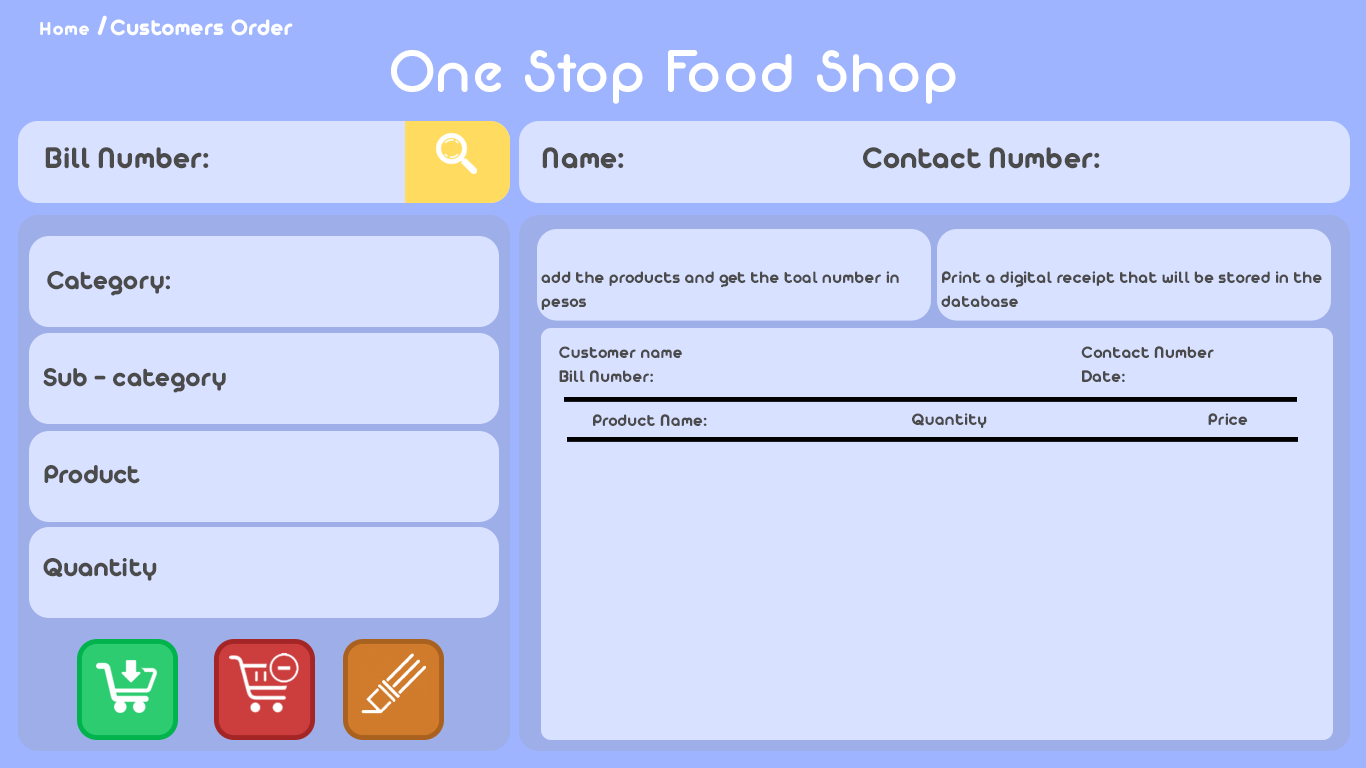
<style>
.page{position:relative;width:1366px;height:768px;background:#d8e1ff}
.page>*{position:absolute;margin:0}
.t1{font:24px "AristaProAlternate-Bold";letter-spacing:0.005em;color:#ffffff}
.t2{font:20px "AristaProAlternate-Bold";letter-spacing:0.075em;color:#ffffff}
.t3{font:30px "AristaProAlternate-Bold";letter-spacing:0.075em;color:#ffffff}
.t4{font:60px "Neon80s";letter-spacing:0.005em;color:#ffffff}
.t5{font:32px "AristaProAlternate-Bold";letter-spacing:0.005em;color:#4b4b4b}
.t6{font:28px "AristaProAlternate-Bold";letter-spacing:0.005em;color:#4b4b4b}
.t7{font:18px "AristaProAlternate-Bold";letter-spacing:0.005em;color:#4b4b4b}
.t8{font:36px "AristaProAlternate-Bold";letter-spacing:0.005em;color:#4b4b4b}
.t9{font:18px/24px "AristaProAlternate-Bold";letter-spacing:0.005em;color:#4b4b4b}
.t10{font:36px/24px "AristaProAlternate-Bold";letter-spacing:0.005em;color:#4b4b4b}
</style>
<div class="page">
<p class="t1" style="left:40px;top:15px;width:253px;height:21px"><span class="t2">Home </span><span class="t3">/</span>Customers Order</p>
<p class="t4" style="left:391px;top:50px;width:565px;height:54px">One Stop Food Shop</p>
<p class="t5" style="left:45px;top:147px;width:164px;height:22px">Bill Number:</p>
<p class="t5" style="left:542px;top:147px;width:82px;height:22px">Name:</p>
<p class="t5" style="left:863px;top:147px;width:237px;height:22px">Contact Number:</p>
<p class="t6" style="left:47px;top:271px;width:123px;height:25px">Category:</p>
<p class="t7" style="left:541px;top:271px;width:358px;height:39px"><span class="t8"><br></span>add the products and get the toal number in pesos</p>
<p class="t9" style="left:941px;top:271px;width:381px;height:36px"><span class="t10"><br></span>Print a digital receipt that will be stored in the <br>database</p>
<p class="t9" style="left:559px;top:346px;width:123px;height:36px">Customer name<br>Bill Number:</p>
<p class="t9" style="left:1081px;top:346px;width:133px;height:36px">Contact Number<br> Date:</p>
<p class="t6" style="left:43px;top:368px;width:183px;height:25px">Sub - category</p>
<p class="t7" style="left:593px;top:414px;width:114px;height:12px">Product Name:</p>
<p class="t7" style="left:912px;top:413px;width:75px;height:15px">Quantity</p>
<p class="t7" style="left:1208px;top:413px;width:40px;height:12px">Price</p>
<p class="t6" style="left:44px;top:465px;width:96px;height:19px">Product</p>
<p class="t6" style="left:43px;top:558px;width:114px;height:23px">Quantity</p>
</div>
